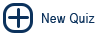
<style>
.page{position:relative;width:107px;height:36px;background:#ffffff}
.page>*{position:absolute;margin:0}
.t1{font:13.6px "ArialNarrow";letter-spacing:0.05em;color:#0c325c}
</style>
<div class="page">
<p class="t1" style="left:42px;top:13px;width:53px;height:11px">New Quiz</p>
</div>
